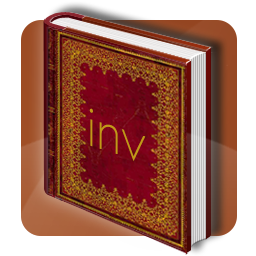
<style>
.page{position:relative;width:256px;height:256px;background:#ffffff}
.page>*{position:absolute;margin:0}
.t1{font:69.6px "JosefinSans-Light";letter-spacing:-0.05em;color:#c29818;scale:0.86 1}
</style>
<div class="page">
<p class="t1" style="left:89px;top:108px;width:57px;height:53px;rotate:17deg">inv</p>
</div>
